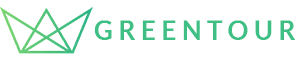
<style>
.page{position:relative;width:300px;height:60px;background:#ffffff}
.page>*{position:absolute;margin:0}
.t1{font:26.5px "Lato-Bold";letter-spacing:0.2em;color:#3fbf84}
</style>
<div class="page">
<p class="t1" style="left:94px;top:20px;width:201px;height:20px">GREENTOUR</p>
</div>
